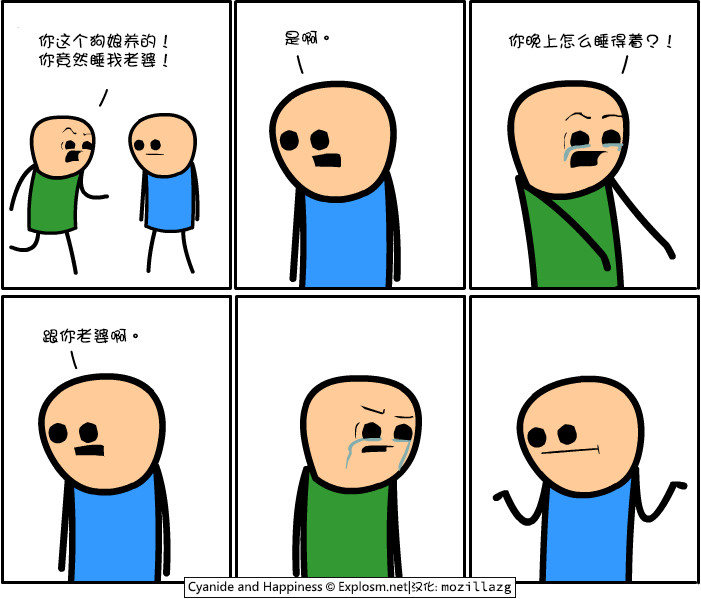
<style>
.page{position:relative;width:701px;height:599px;background:#ffffff}
.page>*{position:absolute;margin:0}
.t1{font:17px "DFGirl";color:#000000}
.t2{font:17px/19px "DFGirl";color:#000000}
</style>
<div class="page">
<p class="t1" style="left:285px;top:30px;width:44px;height:16px">是啊。</p>
<p class="t2" style="left:38px;top:33px;width:130px;height:35px">你这个狗娘养的！<br>你竟然睡我老婆！</p>
<p class="t1" style="left:508px;top:33px;width:164px;height:16px">你晚上怎么睡得着？！</p>
<p class="t1" style="left:43px;top:328px;width:95px;height:16px">跟你老婆啊。</p>
</div>
